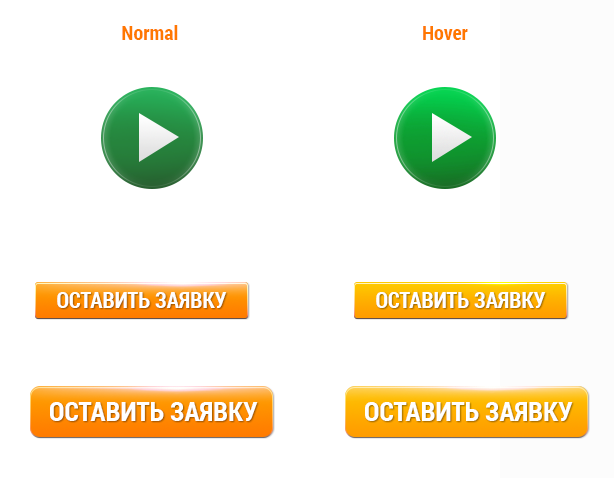
<style>
.page{position:relative;width:614px;height:478px;background:#ffffff}
.page>*{position:absolute;margin:0}
.t1{font:20px "RobotoCondensed-Bold";color:#ff7800}
.t2{font:22px "RobotoCondensed-Bold";color:#ffffff;text-transform:uppercase}
.t3{font:27px "RobotoCondensed-Bold";color:#ffffff;text-transform:uppercase}
</style>
<div class="page">
<p class="t1" style="left:122px;top:25px;width:56px;height:15px">Normal</p>
<p class="t1" style="left:423px;top:26px;width:45px;height:14px">Hover</p>
<p class="t2" style="left:57px;top:292px;width:170px;height:16px">оставить заявку</p>
<p class="t2" style="left:376px;top:292px;width:170px;height:16px">оставить заявку</p>
<p class="t3" style="left:50px;top:402px;width:208px;height:19px">оставить заявку</p>
<p class="t3" style="left:365px;top:402px;width:208px;height:19px">оставить заявку</p>
</div>
